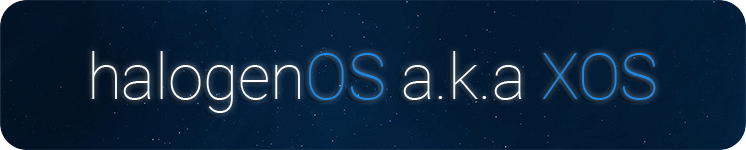
<style>
.page{position:relative;width:746px;height:150px}
.page>*{position:absolute;margin:0}
.t1{font:63.7px "Roboto-Thin";color:#ffffff}
.t2{font:63.7px "Roboto-Thin";color:#1e88e5}
</style>
<div class="page">
<p class="t1" style="left:92px;top:51px;width:564px;height:62px">halogen<span class="t2">OS </span>a.k.a <span class="t2">XOS</span></p>
</div>
